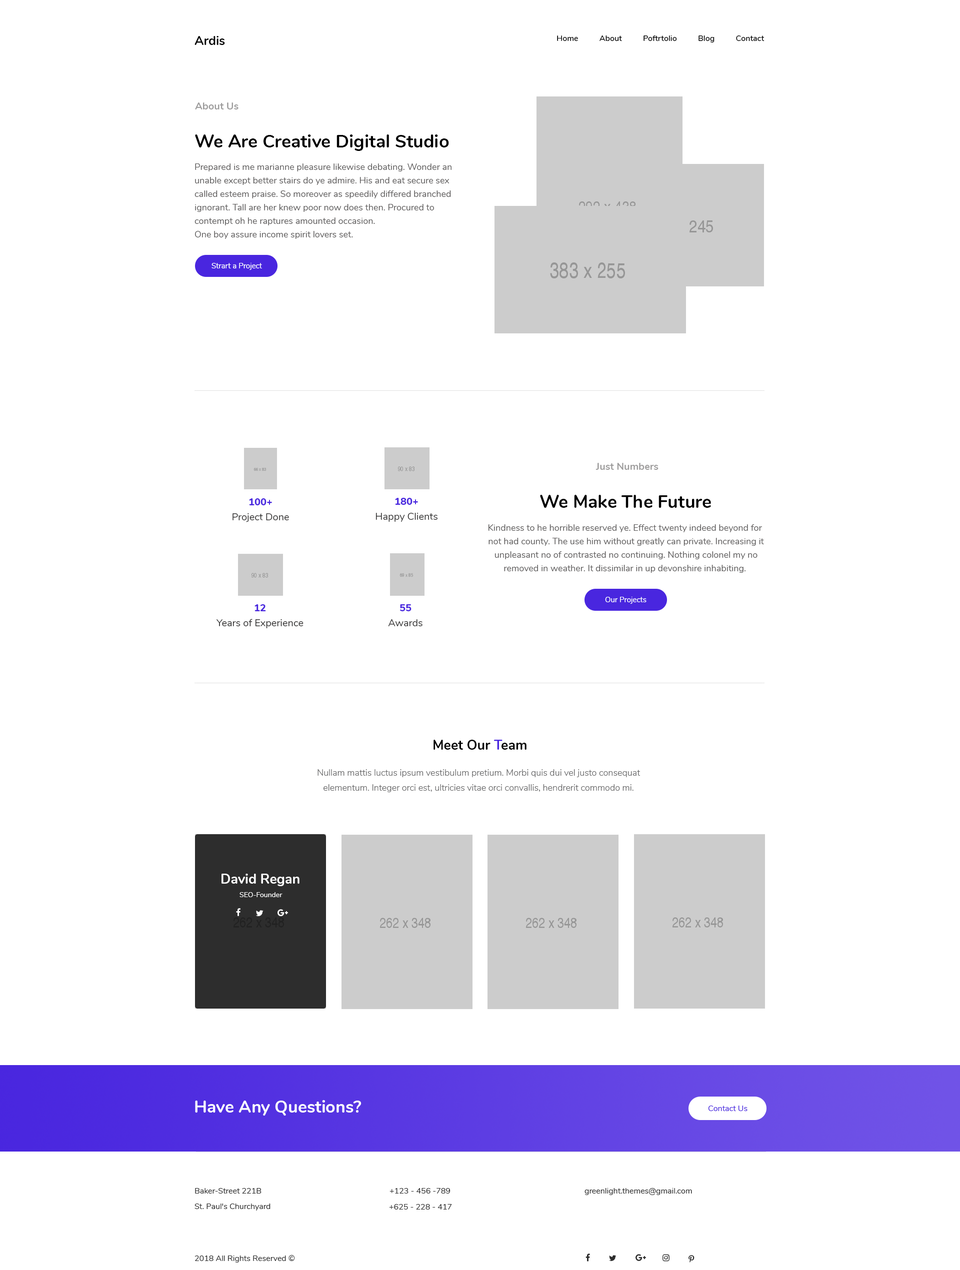
<style>
.page{position:relative;width:960px;height:1270px;background:#ffffff}
.page>*{position:absolute;margin:0}
.t1{font:12.5px "Nunito-Bold";color:#010101}
.t2{font:8px "Nunito-SemiBold";color:#000000}
.t3{font:10px "Nunito-Bold";color:#9e9d9d}
.t4{font:18px "Nunito-Bold";color:#000000}
.t5{font:9px/13.5px "Nunito-Regular";color:#5a5858}
.t6{font:7.5px "Nunito-Regular";color:#ffffff}
.t7{font:10px/15px "Nunito-Regular";color:#333232}
.t8{font:10px/15px "Nunito-ExtraBold";color:#4926df}
.t9{font:13.5px "Nunito-Bold";color:#000000}
.t10{font:13.5px "Nunito-Bold";color:#4926df}
.t11{font:9px/15px "Nunito-Light";color:#626263}
.t12{font:13.5px "Nunito-Bold";color:#ffffff}
.t13{font:7px "Nunito-Regular";color:#ffffff}
.t14{font:17px "Nunito-Bold";color:#ffffff}
.t15{font:8px "Nunito-Regular";color:#4926df}
.t16{font:8px "Nunito-Regular";color:#2e2e2e}
</style>
<div class="page">
<p class="t1" style="left:194px;top:36px;width:31px;height:9px">Ardis</p>
<p class="t2" style="left:557px;top:36px;width:207px;height:6px">Home          About          Poftrtolio          Blog          Contact</p>
<p class="t3" style="left:195px;top:102px;width:43px;height:8px">About Us</p>
<p class="t4" style="left:195px;top:134px;width:254px;height:17px">We Are Creative Digital Studio</p>
<p class="t5" style="left:194px;top:164px;width:258px;height:75px">Prepared is me marianne pleasure likewise debating. Wonder an<br>unable except better stairs do ye admire. His and eat secure sex <br>called esteem praise. So moreover as speedily differed branched <br>ignorant. Tall are her knew poor now does then. Procured to <br>contempt oh he raptures amounted occasion. <br>One boy assure income spirit lovers set.</p>
<p class="t6" style="left:212px;top:263px;width:50px;height:7px">Strart a Project</p>
<p class="t3" style="left:596px;top:463px;width:62px;height:7px">Just Numbers</p>
<p class="t4" style="left:540px;top:495px;width:171px;height:13px">We Make The Future</p>
<p class="t7" style="left:232px;top:498px;width:57px;height:24px;text-align:center"><span class="t8">100+<br></span>Project Done</p>
<p class="t7" style="left:376px;top:498px;width:62px;height:24px;text-align:center"><span class="t8">180+<br></span>Happy Clients</p>
<p class="t5" style="left:488px;top:524px;width:276px;height:49px;text-align:center">Kindness to he horrible reserved ye. Effect twenty indeed beyond for <br>not had county. The use him without greatly can private. Increasing it<br> unpleasant no of contrasted no continuing. Nothing colonel my no <br>removed in weather. It dissimilar in up devonshire inhabiting.</p>
<p class="t7" style="left:216px;top:604px;width:88px;height:24px;text-align:center"><span class="t8">12<br></span>Years of Experience</p>
<p class="t7" style="left:388px;top:604px;width:34px;height:22px;text-align:center"><span class="t8">55<br></span>Awards</p>
<p class="t6" style="left:605px;top:597px;width:41px;height:7px">Our Projects</p>
<p class="t9" style="left:434px;top:740px;width:92px;height:10px">Meet Our <span class="t10">T</span>eam</p>
<p class="t11" style="left:318px;top:770px;width:322px;height:22px;text-align:center">Nullam mattis luctus ipsum vestibulum pretium. Morbi quis dui vel justo consequat<br>elementum. Integer orci est, ultricies vitae orci convallis, hendrerit commodo mi.</p>
<p class="t12" style="left:222px;top:874px;width:78px;height:12px">David Regan</p>
<p class="t13" style="left:240px;top:892px;width:42px;height:6px">SEO-Founder</p>
<p class="t14" style="left:195px;top:1100px;width:167px;height:16px">Have Any Questions?</p>
<p class="t15" style="left:708px;top:1106px;width:40px;height:6px">Contact Us</p>
<p class="t16" style="left:195px;top:1188px;width:67px;height:6px">Baker-Street 221B</p>
<p class="t16" style="left:390px;top:1188px;width:60px;height:6px">+123 - 456 -789</p>
<p class="t16" style="left:584px;top:1188px;width:108px;height:8px">greenlight.themes@gmail.com</p>
<p class="t16" style="left:194px;top:1204px;width:76px;height:7px">St. Paul's Churchyard</p>
<p class="t16" style="left:389px;top:1204px;width:63px;height:6px">+625 - 228 - 417</p>
<p class="t16" style="left:194px;top:1256px;width:101px;height:7px">2018 All Rights Reserved ©</p>
</div>
